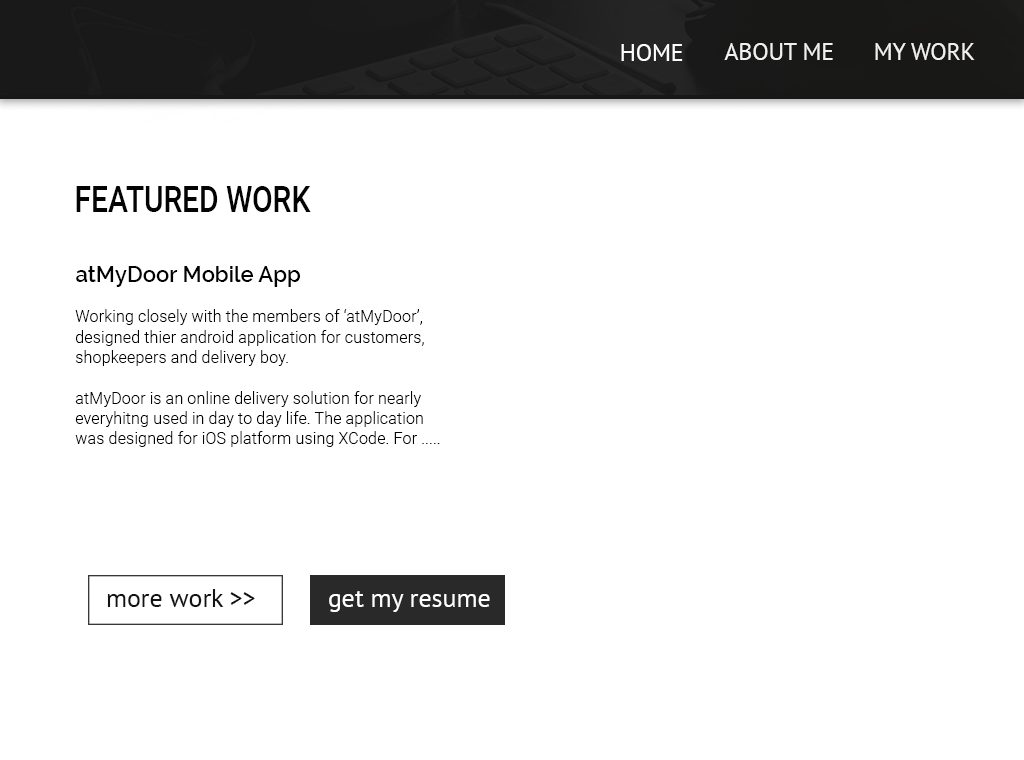
<style>
.page{position:relative;width:1024px;height:760px;background:#ffffff}
.page>*{position:absolute;margin:0}
.t1{font:23.7px "PTSans-Regular";color:#ffffff}
.t2{font:37.3px "Roboto-Medium";color:#030303;scale:0.8 1}
.t3{font:22px "Raleway-SemiBold";color:#020202}
.t4{font:16.9px "Roboto-Light";color:#020202;scale:0.97 1}
.t5{font:26.3px "PTSans-Regular";color:#131313}
.t6{font:26.3px "PTSans-Regular";color:#ffffff}
</style>
<div class="page">
<p class="t1" style="left:621px;top:44px;width:62px;height:17px">HOME</p>
<p class="t1" style="left:724px;top:43px;width:109px;height:17px">ABOUT ME</p>
<p class="t1" style="left:875px;top:43px;width:100px;height:17px">MY WORK</p>
<p class="t2" style="left:76px;top:186px;width:235px;height:26px">FEATURED WORK</p>
<p class="t3" style="left:76px;top:266px;width:224px;height:21px">atMyDoor Mobile App</p>
<p class="t4" style="left:75px;top:309px;width:365px;height:138px">Working closely with the members of ‘atMyDoor’, <br>designed thier android application for customers,  <br>shopkeepers and delivery boy. <br><br>atMyDoor is an online delivery solution for nearly <br>everyhitng used in day to day life. The application <br>was designed for iOS platform using XCode. For .....</p>
<p class="t5" style="left:107px;top:589px;width:148px;height:18px">more work &gt;&gt;</p>
<p class="t6" style="left:329px;top:591px;width:161px;height:21px">get my resume</p>
</div>
